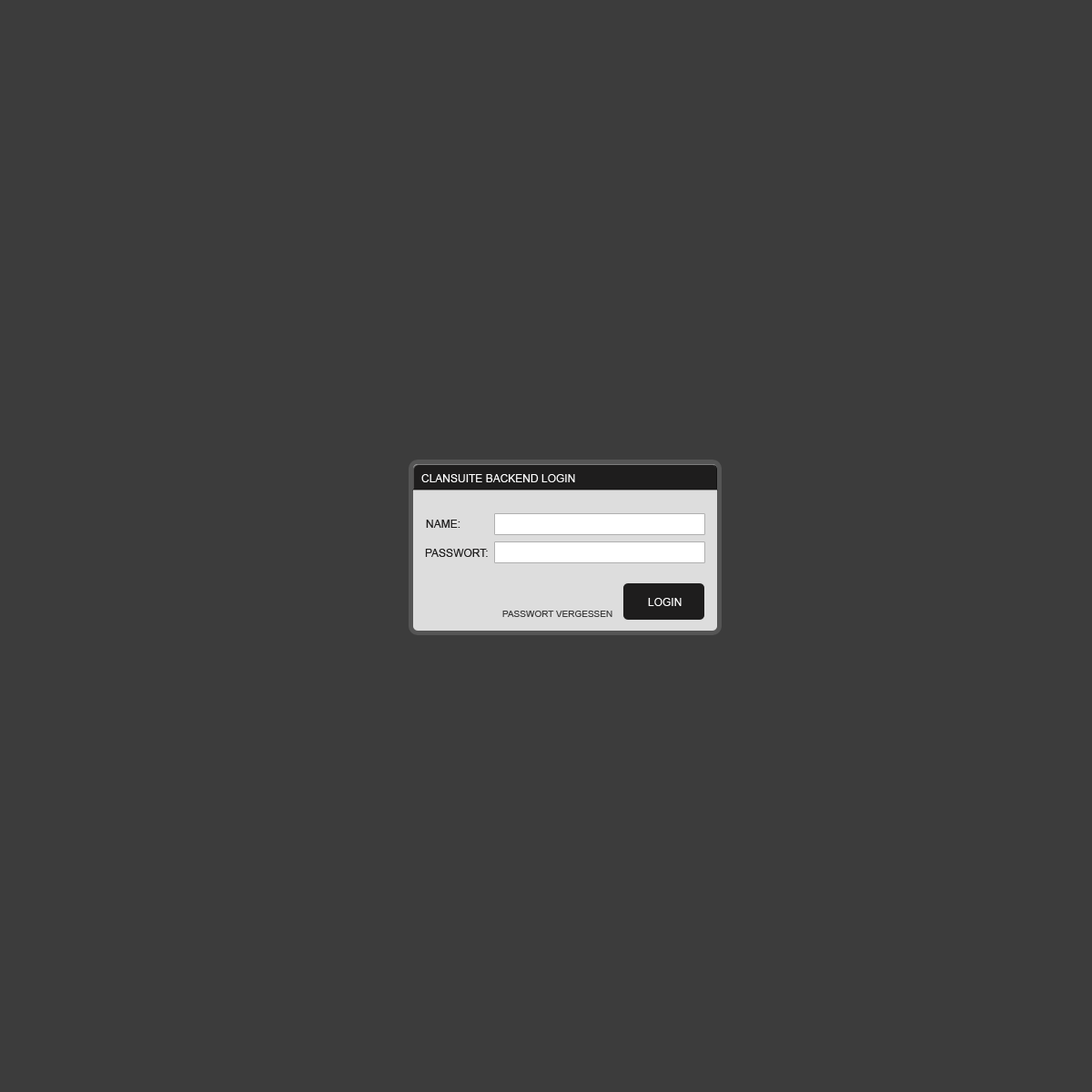
<style>
.page{position:relative;width:1092px;height:1092px;background:#3c3c3c}
.page>*{position:absolute;margin:0}
.t1{font:10.9px "ArialMT";color:#ffffff;text-transform:uppercase}
.t2{font:10.9px "ArialMT";color:#1e1d1d;text-transform:uppercase}
.t3{font:9.1px "ArialMT";color:#3c3c3c;text-transform:uppercase}
</style>
<div class="page">
<p class="t1" style="left:421px;top:474px;width:154px;height:8px">Clansuite Backend login</p>
<p class="t2" style="left:426px;top:520px;width:34px;height:8px">Name:</p>
<p class="t2" style="left:425px;top:549px;width:63px;height:8px">Passwort:</p>
<p class="t1" style="left:648px;top:598px;width:34px;height:8px">login</p>
<p class="t3" style="left:502px;top:611px;width:110px;height:6px">Passwort vergessen</p>
</div>
